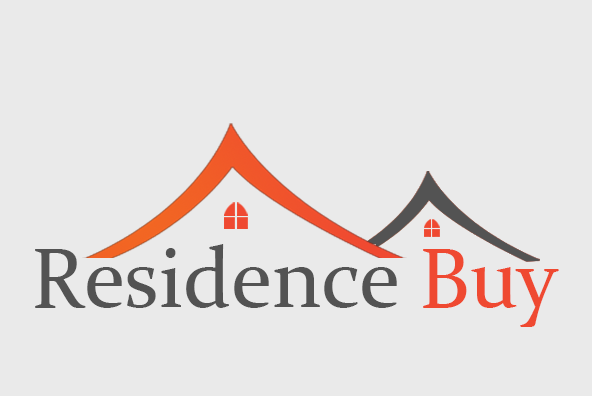
<style>
.page{position:relative;width:592px;height:396px;background:#eaeaea}
.page>*{position:absolute;margin:0}
.t1{font:85.1px "Constantia";color:#535353}
.t2{font:85.1px "Constantia";color:#ef4931}
</style>
<div class="page">
<p class="t1" style="left:35px;top:244px;width:524px;height:83px">Residence<span class="t2"> Buy</span></p>
</div>
